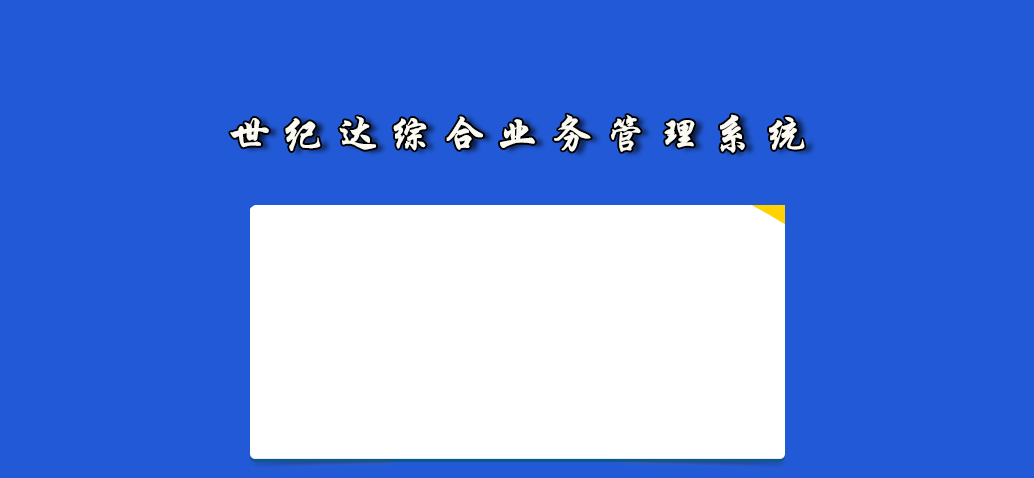
<style>
.page{position:relative;width:1034px;height:478px;background:#2259d6}
.page>*{position:absolute;margin:0}
.t1{font:42.2px "STXingkai";letter-spacing:0.24em;color:#faf9f2;font-weight:bold}
</style>
<div class="page">
<p class="t1" style="left:230px;top:114px;width:575px;height:39px">世纪达综合业务管理系统</p>
</div>
